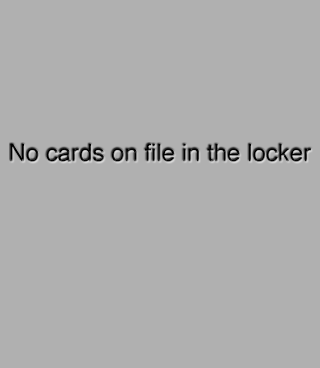
<style>
.page{position:relative;width:320px;height:368px;background:#b0b0b0}
.page>*{position:absolute;margin:0}
.t1{font:24px "Helvetica";color:#000000}
</style>
<div class="page">
<p class="t1" style="left:10px;top:143px;width:301px;height:19px">No cards on file in the locker</p>
</div>
